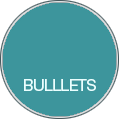
<style>
.page{position:relative;width:120px;height:120px;background:#3d959c}
.page>*{position:absolute;margin:0}
.t1{font:16px "HelveticaNeueLTStd-Roman";letter-spacing:-0.04em;color:#eaffff}
</style>
<div class="page">
<p class="t1" style="left:24px;top:79px;width:72px;height:12px">BULLLETS</p>
</div>
